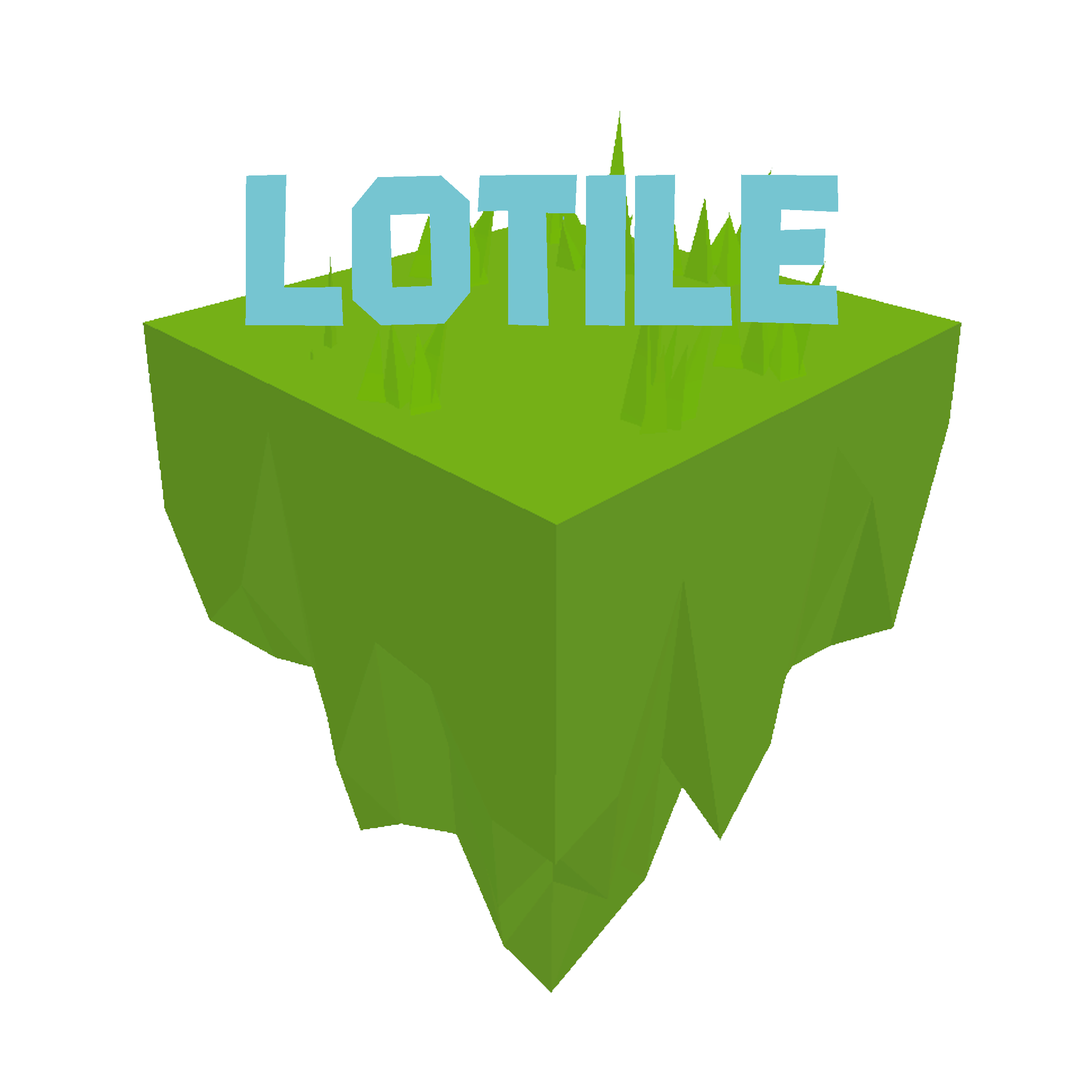
<style>
.page{position:relative;width:1092px;height:1092px;background:#ffffff}
.page>*{position:absolute;margin:0}
.t1{font:213.3px "MachineGunk";color:#76c5d1;scale:1.25 1}
</style>
<div class="page">
<p class="t1" style="left:245px;top:174px;width:593px;height:152px">LOTILE</p>
</div>
